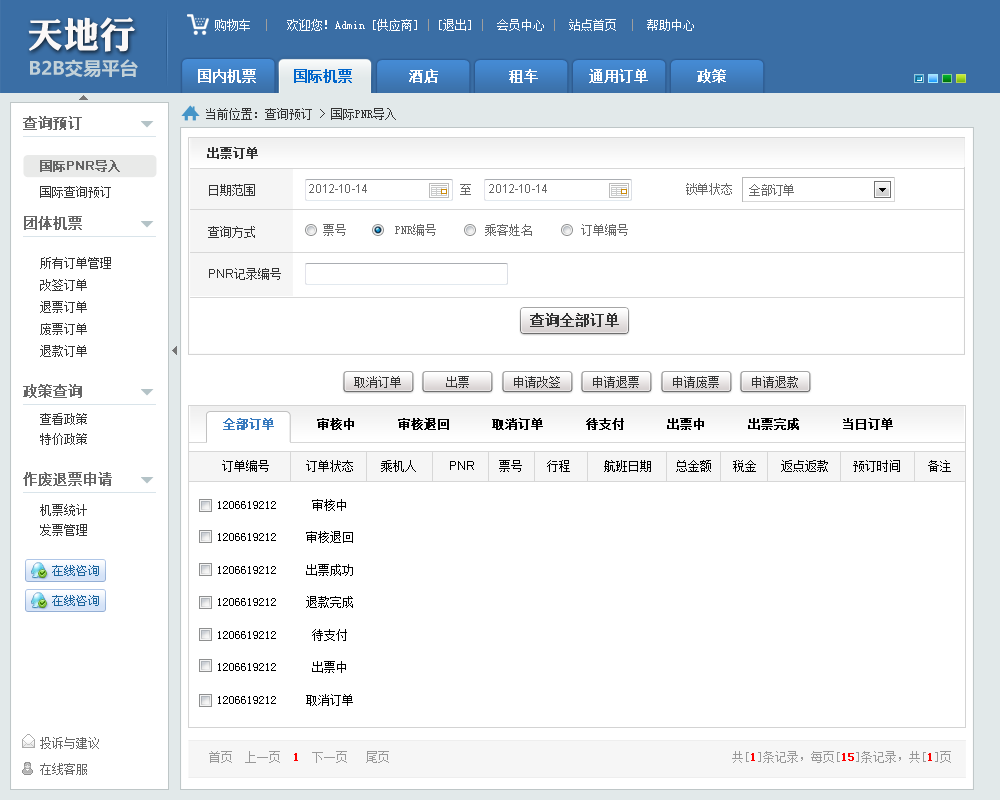
<style>
.page{position:relative;width:1000px;height:800px;background:#ffffff}
.page>*{position:absolute;margin:0}
.t1{font:36.2px "DFPLiJinHeiW8";color:#faf7f7}
.t2{font:12px "SimSun";color:#ffffff}
.t3{font:12px "SimSun";color:#9e9e9e}
.t4{font:18.3px "MicrosoftYaHei-Bold";color:#c2d1d8}
.t5{font:14px "SimSun";color:#ffffff;font-weight:bold}
.t6{font:14px "SimSun";color:#0066cc;font-weight:bold}
.t7{font:12px "SimSun";color:#333333}
.t8{font:14px "SimSun";color:#666666;font-weight:bold}
.t9{font:12px "SimSun";color:#333333;font-weight:bold}
.t10{font:12px "ArialMT";color:#666666;font-weight:bold}
.t11{font:12px "SimSun";color:#666666;font-weight:bold}
.t12{font:12px/42px "SimSun";color:#333333}
.t13{font:12px/42px "ArialMT";color:#333333}
.t14{font:12px "ArialMT";color:#666666}
.t15{font:12px "SimSun";color:#666666}
.t16{font:12px/22px "SimSun";color:#333333}
.t17{font:12px/30px "SimSun";color:#333333}
.t18{font:14px "SimSun";color:#333333;font-weight:bold}
.t19{font:12px/20px "SimSun";color:#333333}
.t20{font:12px "SimSun";color:#000000;font-weight:bold}
.t21{font:12px "SimSun";color:#377abe;font-weight:bold}
.t22{font:12px "SimSun";color:#000000}
.t23{font:12px "ArialMT";color:#000000}
.t24{font:12px/32.5px "SimSun";color:#000000}
.t25{font:12px/26px "SimSun";color:#666666}
.t26{font:12px "SimSun";color:#999999}
.t27{font:12px "SimSun";color:#ff0000;font-weight:bold}
</style>
<div class="page">
<p class="t1" style="left:28px;top:17px;width:107px;height:35px">天地行</p>
<p class="t2" style="left:215px;top:19px;width:35px;height:12px">购物车</p>
<p class="t2" style="left:266px;top:19px;width:428px;height:12px"><span class="t3">|   </span>欢迎您！Admin [供应商]<span class="t3"> | </span>[退出] <span class="t3">|</span>  会员中心 <span class="t3">|</span>  站点首页  <span class="t3">|</span>  帮助中心</p>
<p class="t4" style="left:30px;top:59px;width:108px;height:19px">B2B交易平台</p>
<p class="t5" style="left:198px;top:69px;width:528px;height:14px">国内机票    <span class="t6">国际机票</span>     酒店     租车     通用订单      政策</p>
<p class="t7" style="left:206px;top:108px;width:190px;height:12px">当前位置：查询预订 &gt; 国际PNR导入</p>
<p class="t8" style="left:23px;top:116px;width:59px;height:14px">查询预订</p>
<p class="t9" style="left:207px;top:147px;width:51px;height:12px">出票订单</p>
<p class="t10" style="left:40px;top:160px;width:80px;height:12px"><span class="t11">国际</span>PNR<span class="t11">导入</span></p>
<p class="t12" style="left:208px;top:184px;width:73px;height:96px">日期范围<br>查询方式<br><span class="t13">PNR</span>记录编号</p>
<p class="t14" style="left:309px;top:184px;width:58px;height:9px">2012-10-14</p>
<p class="t15" style="left:460px;top:184px;width:11px;height:11px">至</p>
<p class="t14" style="left:489px;top:184px;width:58px;height:9px">2012-10-14</p>
<p class="t15" style="left:686px;top:183px;width:46px;height:12px">锁单状态</p>
<p class="t15" style="left:749px;top:184px;width:45px;height:12px">全部订单</p>
<p class="t7" style="left:40px;top:186px;width:71px;height:12px">国际查询预订</p>
<p class="t8" style="left:24px;top:216px;width:58px;height:14px">团体机票</p>
<p class="t15" style="left:323px;top:224px;width:305px;height:12px">票号        PNR编号        乘客姓名        订单编号</p>
<p class="t16" style="left:40px;top:257px;width:71px;height:100px"><span class="t17">所有订单管理<br></span>改签订单<br>退票订单<br>废票订单<br>退款订单</p>
<p class="t18" style="left:530px;top:313px;width:89px;height:14px">查询全部订单</p>
<p class="t7" style="left:354px;top:376px;width:47px;height:12px">取消订单</p>
<p class="t7" style="left:446px;top:376px;width:23px;height:12px">出票</p>
<p class="t7" style="left:514px;top:376px;width:46px;height:12px">申请改签</p>
<p class="t7" style="left:593px;top:376px;width:46px;height:12px">申请退票</p>
<p class="t7" style="left:673px;top:376px;width:46px;height:12px">申请废票</p>
<p class="t7" style="left:752px;top:376px;width:46px;height:12px">申请退款</p>
<p class="t8" style="left:23px;top:384px;width:59px;height:14px">政策查询</p>
<p class="t19" style="left:40px;top:413px;width:47px;height:32px">查看政策<br>特价政策</p>
<p class="t20" style="left:223px;top:418px;width:670px;height:12px"><span class="t21">全部订单      </span>审核中      审核退回      取消订单      待支付      出票中      出票完成      当日订单</p>
<p class="t22" style="left:222px;top:460px;width:729px;height:12px">订单编号            订单状态         乘机人           <span class="t23">PNR        </span>票号        行程      航班日期        总金额       税金        返点返款        预订时间         备注</p>
<p class="t8" style="left:23px;top:472px;width:89px;height:14px">作废退票申请</p>
<p class="t19" style="left:40px;top:504px;width:47px;height:32px">机票统计<br>发票管理</p>
<p class="t24" style="left:218px;top:501px;width:58px;height:203px">1206619212<br>1206619212<br>1206619212<br>1206619212<br>1206619212<br>1206619212<br>1206619212</p>
<p class="t24" style="left:306px;top:499px;width:47px;height:207px;text-align:center">审核中<br>审核退回<br>出票成功<br>退款完成<br>待支付<br>出票中<br>取消订单</p>
<p class="t25" style="left:40px;top:737px;width:59px;height:38px">投诉与建议 <br>在线客服</p>
<p class="t26" style="left:209px;top:751px;width:742px;height:12px">首页  上一页  <span class="t27">1</span>  下一页   尾页                                                         共[<span class="t27">1</span>]条记录，每页[<span class="t27">15</span>]条记录，共[<span class="t27">1</span>]页</p>
</div>
